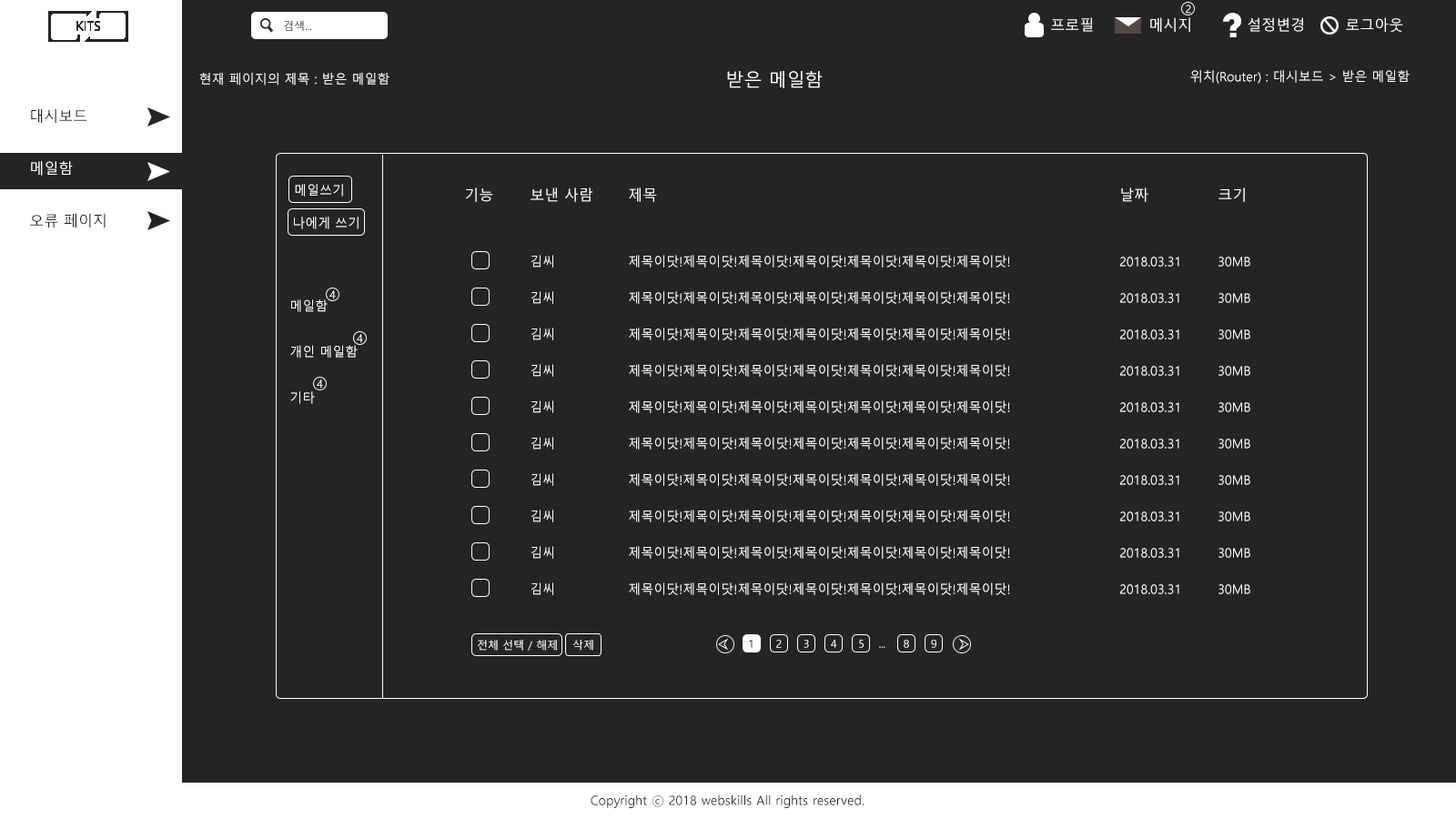
<style>
.page{position:relative;width:1456px;height:819px;background:#242424}
.page>*{position:absolute;margin:0}
.t1{font:10.9px "MalgunGothic"}
.t2{font:14.6px "MalgunGothic";color:#ffffff}
.t3{font:12.7px "MalgunGothic";color:#ffffff}
.t4{font:18.2px "MalgunGothic";color:#ffffff}
.t5{font:10.9px "MalgunGothic";color:#ffffff}
.t6{font:10.9px "MalgunGothic";letter-spacing:-0.02em;color:#ffffff}
.t7{font:10.9px "MalgunGothic";letter-spacing:-0.02em;color:#000000}
.t8{font:12.7px "MalgunGothic";color:#242424}
</style>
<div class="page">
<p class="t1" style="left:1186px;top:5px;width:5px;height:9px">2</p>
<p class="t2" style="left:1051px;top:17px;width:352px;height:15px">프로필  메시지  설정변경  로그아웃</p>
<p class="t1" style="left:284px;top:20px;width:28px;height:11px">검색...</p>
<p class="t3" style="left:199px;top:73px;width:190px;height:13px">현재 페이지의 제목 : 받은 메일함</p>
<p class="t4" style="left:727px;top:71px;width:96px;height:17px">받은 메일함</p>
<p class="t3" style="left:1190px;top:70px;width:220px;height:14px">위치(Router) : 대시보드 &gt; 받은 메일함</p>
<p class="t3" style="left:295px;top:184px;width:48px;height:13px">메일쓰기</p>
<p class="t2" style="left:465px;top:187px;width:780px;height:15px">기능  보낸 사람  제목               날짜   크기</p>
<p class="t3" style="left:294px;top:217px;width:65px;height:12px">나에게 쓰기</p>
<p class="t3" style="left:531px;top:255px;width:719px;height:13px">김씨   제목이닷!제목이닷!제목이닷!제목이닷!제목이닷!제목이닷!제목이닷!    2018.03.31  30MB</p>
<p class="t5" style="left:329px;top:290px;width:7px;height:9px">4</p>
<p class="t3" style="left:531px;top:291px;width:719px;height:13px">김씨   제목이닷!제목이닷!제목이닷!제목이닷!제목이닷!제목이닷!제목이닷!    2018.03.31  30MB</p>
<p class="t3" style="left:290px;top:299px;width:68px;height:105px">메일함<br><br><br>개인 메일함<br><br><br>기타</p>
<p class="t3" style="left:531px;top:328px;width:719px;height:12px">김씨   제목이닷!제목이닷!제목이닷!제목이닷!제목이닷!제목이닷!제목이닷!    2018.03.31  30MB</p>
<p class="t5" style="left:357px;top:334px;width:6px;height:9px">4</p>
<p class="t3" style="left:531px;top:364px;width:719px;height:13px">김씨   제목이닷!제목이닷!제목이닷!제목이닷!제목이닷!제목이닷!제목이닷!    2018.03.31  30MB</p>
<p class="t5" style="left:317px;top:379px;width:6px;height:10px">4</p>
<p class="t3" style="left:531px;top:400px;width:719px;height:13px">김씨   제목이닷!제목이닷!제목이닷!제목이닷!제목이닷!제목이닷!제목이닷!    2018.03.31  30MB</p>
<p class="t3" style="left:531px;top:437px;width:719px;height:13px">김씨   제목이닷!제목이닷!제목이닷!제목이닷!제목이닷!제목이닷!제목이닷!    2018.03.31  30MB</p>
<p class="t3" style="left:531px;top:473px;width:719px;height:13px">김씨   제목이닷!제목이닷!제목이닷!제목이닷!제목이닷!제목이닷!제목이닷!    2018.03.31  30MB</p>
<p class="t3" style="left:531px;top:510px;width:719px;height:12px">김씨   제목이닷!제목이닷!제목이닷!제목이닷!제목이닷!제목이닷!제목이닷!    2018.03.31  30MB</p>
<p class="t3" style="left:531px;top:546px;width:719px;height:13px">김씨   제목이닷!제목이닷!제목이닷!제목이닷!제목이닷!제목이닷!제목이닷!    2018.03.31  30MB</p>
<p class="t3" style="left:531px;top:582px;width:719px;height:13px">김씨   제목이닷!제목이닷!제목이닷!제목이닷!제목이닷!제목이닷!제목이닷!    2018.03.31  30MB</p>
<p class="t5" style="left:478px;top:640px;width:79px;height:11px">전체 선택 / 해제</p>
<p class="t5" style="left:572px;top:640px;width:21px;height:11px">삭제</p>
<p class="t6" style="left:749px;top:640px;width:187px;height:8px"><span class="t7">1</span>      2      3      4      5    ...     8      9</p>
<p class="t8" style="left:591px;top:794px;width:273px;height:14px">Copyright ⓒ 2018 webskills All rights reserved.</p>
</div>
